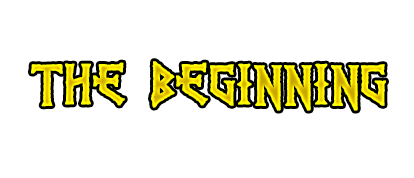
<style>
.page{position:relative;width:414px;height:178px;background:#ffffff}
.page>*{position:absolute;margin:0}
.t1{font:60px "PRViking";font-weight:bold}
</style>
<div class="page">
<p class="t1" style="left:31px;top:61px;width:355px;height:50px">THe beginning</p>
</div>
